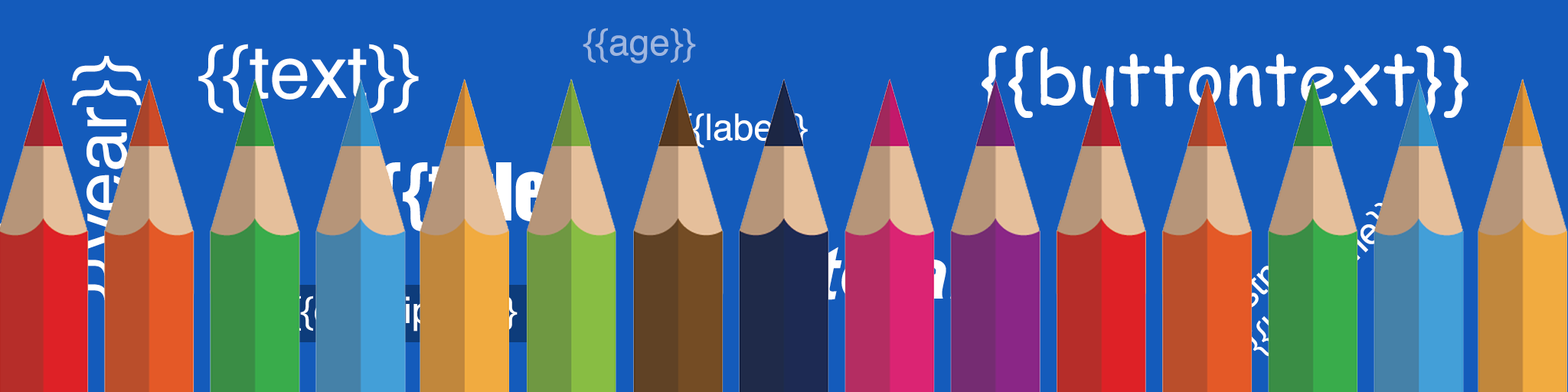
<style>
.page{position:relative;width:1568px;height:392px;background:#145bbb}
.page>*{position:absolute;margin:0}
.t1{font:36.8px "Helvetica";color:#9eb6df}
.t2{font:73.5px "Helvetica";color:#ffffff}
.t3{font:73.5px "ComicSansMS";color:#ffffff}
.t4{font:73.7px "Helvetica";color:#ffffff}
.t5{font:36.8px "Helvetica";color:#ffffff}
.t6{font:73.5px "Impact"}
.t7{font:36.8px "Helvetica"}
</style>
<div class="page">
<p class="t1" style="left:583px;top:28px;width:113px;height:36px">{{age}}</p>
<p class="t2" style="left:198px;top:44px;width:221px;height:69px">{{text}}</p>
<p class="t3" style="left:982px;top:45px;width:486px;height:73px">{{buttontext}}</p>
<p class="t4" style="left:72px;top:56px;width:70px;height:244px;rotate:-90deg">{{year}}</p>
<p class="t5" style="left:679px;top:113px;width:129px;height:35px">{{label}}</p>
<p class="t6" style="left:375px;top:162px;width:230px;height:70px">{{title}}</p>
<p class="t7" style="left:288px;top:296px;width:230px;height:36px">{{description}}</p>
</div>
